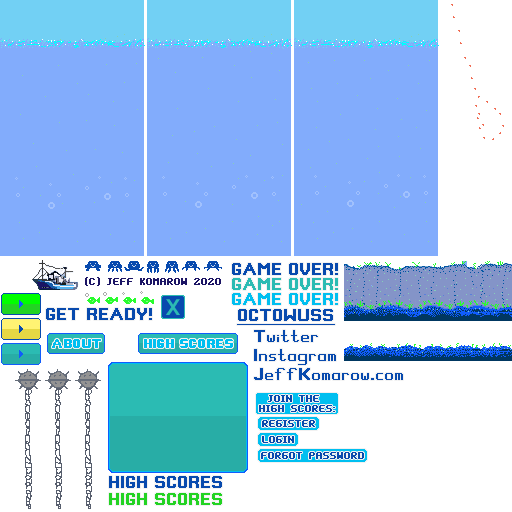
<style>
.page{position:relative;width:512px;height:512px;background:#ffffff}
.page>*{position:absolute;margin:0}
.t1{font:16px "PixelGameFont";color:#084aae;font-weight:bold}
.t2{font:16px "PixelMaster";color:#1b1464;font-weight:bold}
.t3{font:16px "PixelGameFont";color:#2bbbb3;font-weight:bold}
.t4{font:16px "PixelGameFont";color:#00bff0;font-weight:bold}
.t5{font:31px "Bahnschrift";color:#2bbbb3}
.t6{font:16px "PixelGameFont";color:#084aae;font-weight:bold;text-decoration:underline}
.t7{font:12px "PixelGameFont";color:#00bff0;font-weight:bold}
.t8{font:16px/19px "PixelGameFont";color:#084aae;font-weight:bold}
.t9{font:16px/10px "PixelMaster";color:#084aae;font-weight:bold}
.t10{font:16px "PixelMaster";color:#084aae;font-weight:bold}
.t11{font:16px "PixelGameFont";color:#23d323;font-weight:bold}
</style>
<div class="page">
<p class="t1" style="left:232px;top:263px;width:106px;height:12px">GAME OVER!</p>
<p class="t2" style="left:85px;top:277px;width:136px;height:9px">(C) JEFF KOMAROW 2020</p>
<p class="t3" style="left:232px;top:278px;width:106px;height:12px">GAME OVER!</p>
<p class="t4" style="left:232px;top:293px;width:106px;height:12px">GAME OVER!</p>
<p class="t5" style="left:166px;top:299px;width:14px;height:16px">x</p>
<p class="t1" style="left:46px;top:308px;width:106px;height:12px">GET READY!</p>
<p class="t6" style="left:237px;top:309px;width:98px;height:16px">OCTOWUSS</p>
<p class="t7" style="left:144px;top:339px;width:89px;height:9px">HIGH SCORES</p>
<p class="t8" style="left:254px;top:330px;width:149px;height:50px">Twitter<br>Instagram<br>JeffKomarow.com</p>
<p class="t9" style="left:259px;top:395px;width:76px;height:17px;text-align:center">JOIN THE <br>HIGH SCORES:</p>
<p class="t10" style="left:262px;top:420px;width:53px;height:7px">REGISTER</p>
<p class="t10" style="left:262px;top:436px;width:32px;height:7px">LOGIN</p>
<p class="t10" style="left:261px;top:452px;width:103px;height:7px">FORGOT PASSWORD</p>
<p class="t1" style="left:109px;top:476px;width:113px;height:12px">HIGH SCORES</p>
<p class="t11" style="left:109px;top:493px;width:113px;height:12px">HIGH SCORES</p>
</div>
